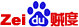
<style>
.page{position:relative;width:79px;height:27px;background:#ffffff}
.page>*{position:absolute;margin:0}
.t1{font:15px "Arial-Black";color:#de0000}
.t2{font:15px "FZZYJW--GB1-0";color:#de0000}
</style>
<div class="page">
<p class="t1" style="left:0px;top:14px;width:26px;height:12px">Zei</p>
<p class="t2" style="left:50px;top:12px;width:15px;height:15px">贼</p>
</div>
